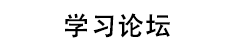
<style>
.page{position:relative;width:241px;height:55px;background:#ffffff}
.page>*{position:absolute;margin:0}
.t1{font:26px "AdobeHeitiStd-Regular";letter-spacing:0.05em;color:#000000}
</style>
<div class="page">
<p class="t1" style="left:65px;top:13px;width:105px;height:25px">学习论坛</p>
</div>
